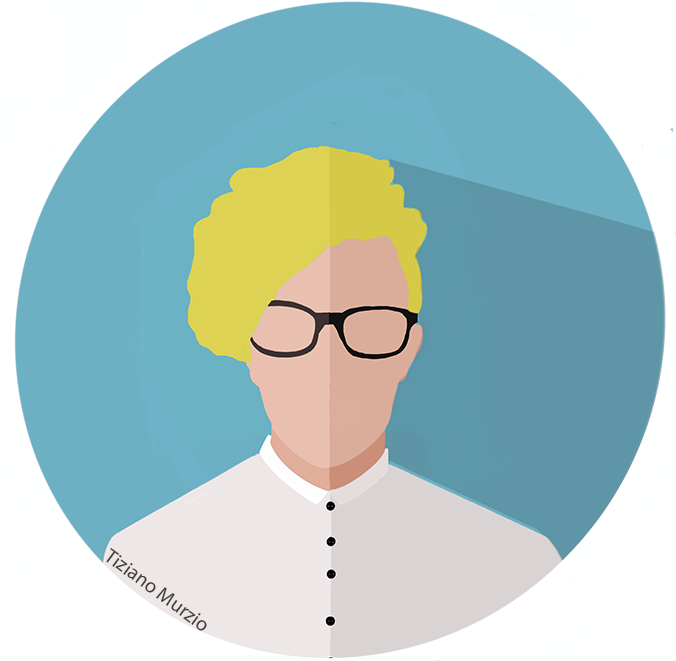
<style>
.page{position:relative;width:676px;height:661px;background:#6db0c4}
.page>*{position:absolute;margin:0}
.t1{font:20.4px "MyriadPro-Regular";color:#3f3c3c}
</style>
<div class="page">
<p class="t1" style="left:106px;top:548px;width:101px;height:83px;rotate:36deg">Tiziano Murzio</p>
</div>
